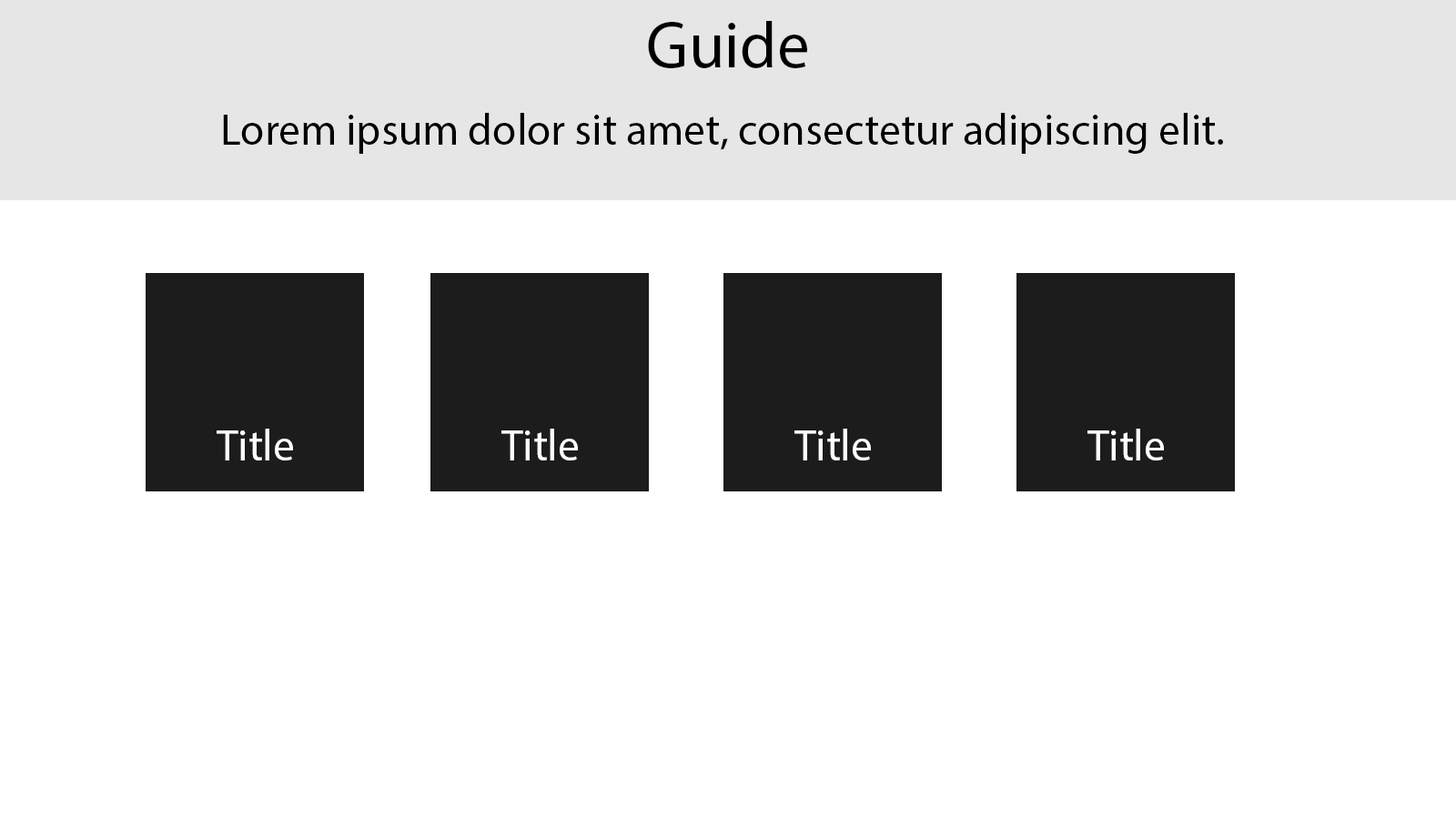
<style>
.page{position:relative;width:1456px;height:819px;background:#ffffff}
.page>*{position:absolute;margin:0}
.t1{font:65.5px "MyriadPro-Regular";color:#000000}
.t2{font:43.7px "MyriadPro-Regular";color:#000000}
.t3{font:43.7px "MyriadPro-Regular";color:#ffffff}
</style>
<div class="page">
<p class="t1" style="left:648px;top:21px;width:159px;height:47px">Guide</p>
<p class="t2" style="left:223px;top:113px;width:1000px;height:41px">Lorem ipsum dolor sit amet, consectetur adipiscing elit.</p>
<p class="t3" style="left:217px;top:429px;width:76px;height:31px">Title</p>
<p class="t3" style="left:501px;top:429px;width:77px;height:31px">Title</p>
<p class="t3" style="left:794px;top:429px;width:77px;height:31px">Title</p>
<p class="t3" style="left:1087px;top:429px;width:77px;height:31px">Title</p>
</div>
